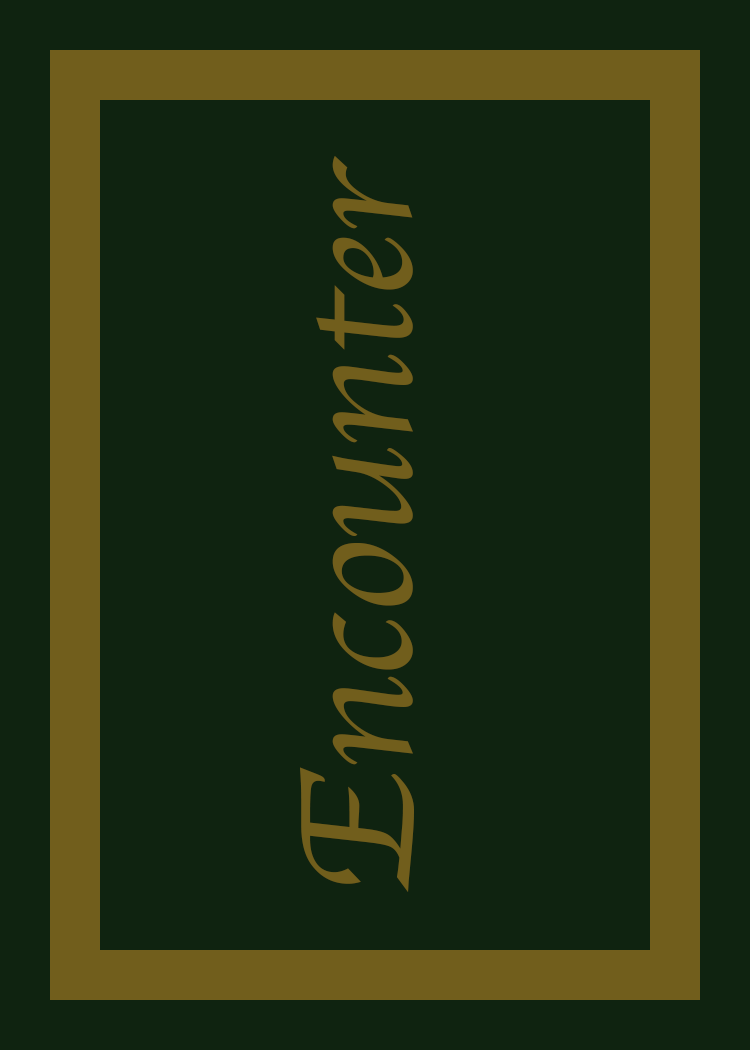
<style>
.page{position:relative;width:750px;height:1050px;background:#0f2310}
.page>*{position:absolute;margin:0}
.t1{font:166.7px "Apple-Chancery";color:#715e1c}
</style>
<div class="page">
<p class="t1" style="left:300px;top:156px;width:114px;height:736px;rotate:-90deg">Encounter</p>
</div>
